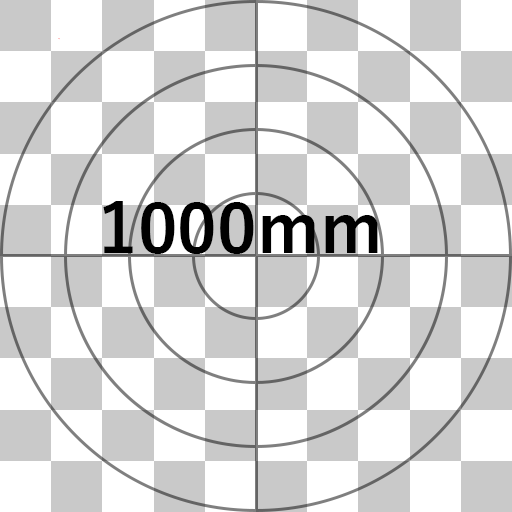
<style>
.page{position:relative;width:512px;height:512px;background:#ffffff}
.page>*{position:absolute;margin:0}
.t1{font:1px "YuGothic-Bold"}
.t2{font:69.4px "YuGothic-Bold";color:#000000}
</style>
<div class="page">
<p class="t1" style="left:58px;top:38px;width:2px;height:2px">1</p>
<p class="t2" style="left:103px;top:201px;width:275px;height:53px">1000mm</p>
</div>
